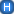
<style>
.page{position:relative;width:14px;height:14px}
.page>*{position:absolute;margin:0}
.t1{font:11px "ArialMT";letter-spacing:-0.05em;color:#ffffff}
</style>
<div class="page">
<p class="t1" style="left:4px;top:3px;width:6px;height:8px">H</p>
</div>
